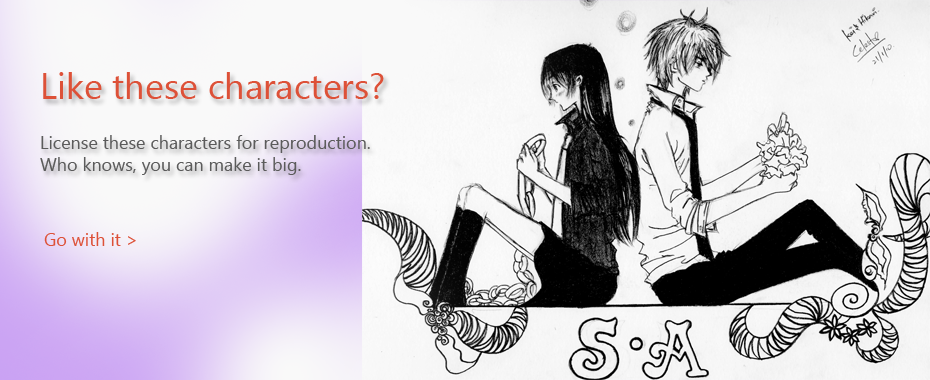
<style>
.page{position:relative;width:930px;height:380px}
.page>*{position:absolute;margin:0}
.t1{font:18px "KhmerUI";color:#5b5b5b}
.t2{font:36px "KhmerUI";color:#dd5138}
.t3{font:18px "KhmerUI";color:#dd5138}
</style>
<div class="page">
<p class="t1" style="left:40px;top:72px;width:344px;height:103px"><span class="t2">Like these characters?<br><br></span>License these characters for reproduction.<br>Who knows, you can make it big.</p>
<p class="t3" style="left:44px;top:232px;width:92px;height:14px">Go with it &gt;</p>
</div>
